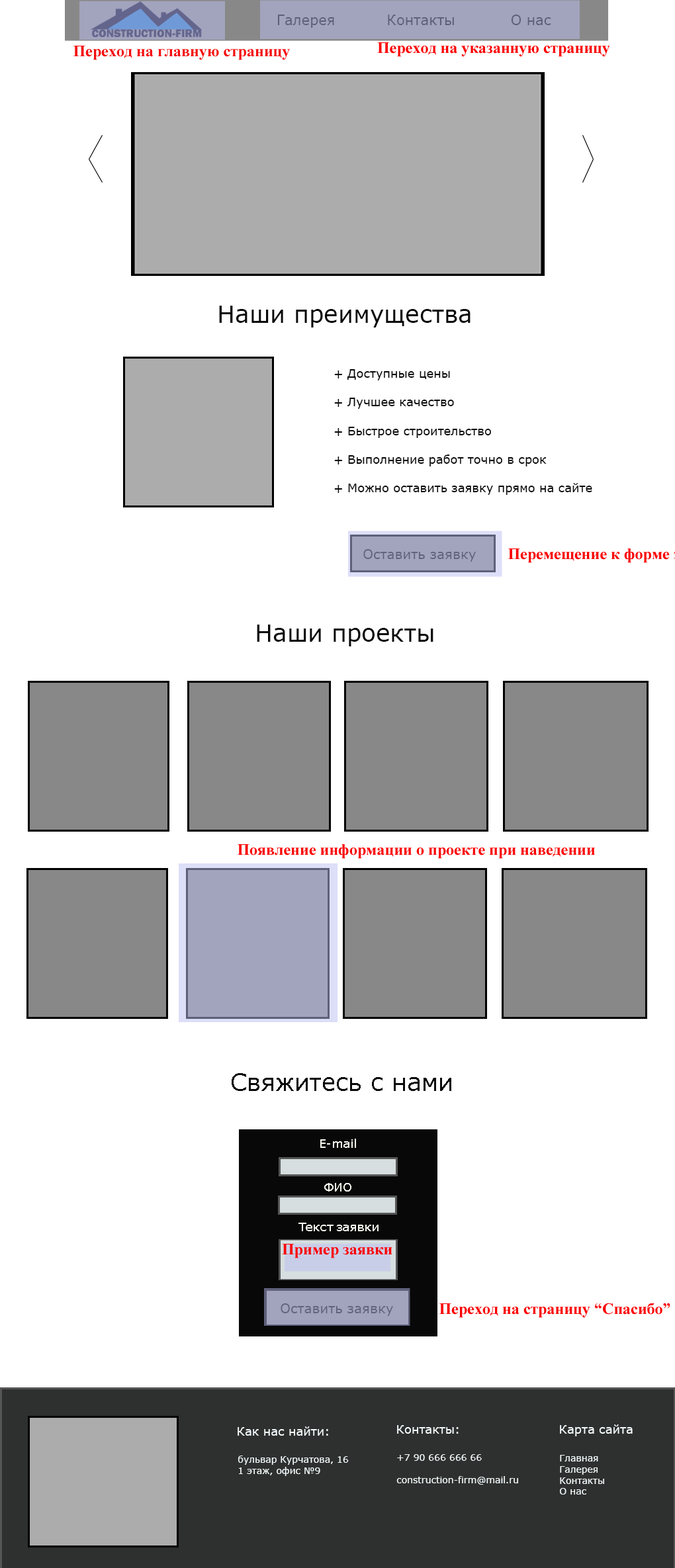
<style>
.page{position:relative;width:675px;height:1568px;background:#ffffff}
.page>*{position:absolute;margin:0}
.t1{font:14.3px "MSReferenceSansSerif";color:#5e5f79}
.t2{font:23.8px "MSReferenceSansSerif";color:#090909}
.t3{font:11.9px "MSReferenceSansSerif";color:#090909}
.t4{font:13.2px "MSReferenceSansSerif";color:#62637d}
.t5{font:11.9px "MSReferenceSansSerif";color:#f8f8ef}
.t6{font:11.9px "MSReferenceSansSerif";color:#f2f9fa}
.t7{font:9.3px "MSReferenceSansSerif";color:#f2f9fa}
</style>
<div class="page">
<p class="t1" style="left:277px;top:15px;width:57px;height:13px">Галерея</p>
<p class="t1" style="left:388px;top:15px;width:66px;height:10px">Контакты</p>
<p class="t1" style="left:511px;top:15px;width:40px;height:10px">О нас</p>
<p class="t2" style="left:219px;top:306px;width:251px;height:21px">Наши преимущества</p>
<p class="t3" style="left:334px;top:369px;width:258px;height:126px">+ Доступные цены<br><br>+ Лучшее качество<br><br>+ Быстрое строительство<br><br>+ Выполнение работ точно в срок<br><br>+ Можно оставить заявку прямо на сайте</p>
<p class="t4" style="left:363px;top:549px;width:113px;height:13px">Оставить заявку</p>
<p class="t2" style="left:257px;top:625px;width:176px;height:21px">Наши проекты</p>
<p class="t2" style="left:232px;top:1073px;width:219px;height:18px">Свяжитесь с нами</p>
<p class="t5" style="left:320px;top:1139px;width:36px;height:9px">E-mail</p>
<p class="t5" style="left:324px;top:1183px;width:27px;height:9px">ФИО</p>
<p class="t5" style="left:298px;top:1223px;width:80px;height:8px">Текст заявки</p>
<p class="t4" style="left:281px;top:1303px;width:112px;height:13px">Оставить заявку</p>
<p class="t6" style="left:238px;top:1426px;width:90px;height:10px">Как нас найти:</p>
<p class="t6" style="left:397px;top:1425px;width:61px;height:9px">Контакты:</p>
<p class="t6" style="left:560px;top:1424px;width:72px;height:12px">Карта сайта</p>
<p class="t7" style="left:238px;top:1456px;width:111px;height:20px">бульвар Курчатова, 16<br>1 этаж, офис №9</p>
<p class="t7" style="left:396px;top:1454px;width:122px;height:31px">+7 90 666 666 66<br><br>construction-firm@mail.ru</p>
<p class="t7" style="left:560px;top:1455px;width:44px;height:40px">Главная<br>Галерея<br>Контакты<br>О нас</p>
</div>
